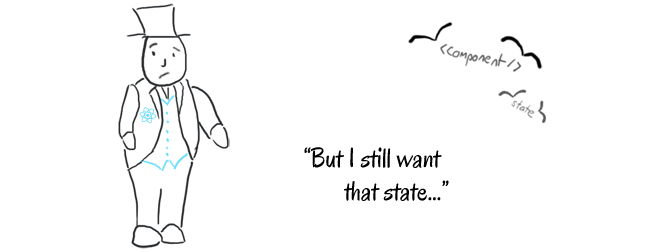
<style>
.page{position:relative;width:650px;height:252px;background:#ffffff}
.page>*{position:absolute;margin:0}
.t1{font:27.7px "Oregano-Regular";color:#000000}
</style>
<div class="page">
<p class="t1" style="left:304px;top:147px;width:145px;height:54px">“But I still want<br>        that state...”</p>
</div>
